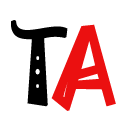
<style>
.page{position:relative;width:128px;height:128px;background:#ffffff}
.page>*{position:absolute;margin:0}
.t1{font:93.6px "Jokerman-Regular";letter-spacing:-0.155em;color:#000000;font-weight:bold;scale:0.85 1}
.t2{font:93.6px "Jokerman-Regular";letter-spacing:-0.155em;color:#eb1010;font-weight:bold;scale:0.85 1}
</style>
<div class="page">
<p class="t1" style="left:11px;top:20px;width:105px;height:91px">T<span class="t2">A</span></p>
</div>
